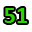
<style>
.page{position:relative;width:32px;height:32px;background:#ffffff}
.page>*{position:absolute;margin:0}
.t1{font:24px "Calibri-Bold";color:#2dd500}
</style>
<div class="page">
<p class="t1" style="left:4px;top:8px;width:23px;height:15px">51</p>
</div>
